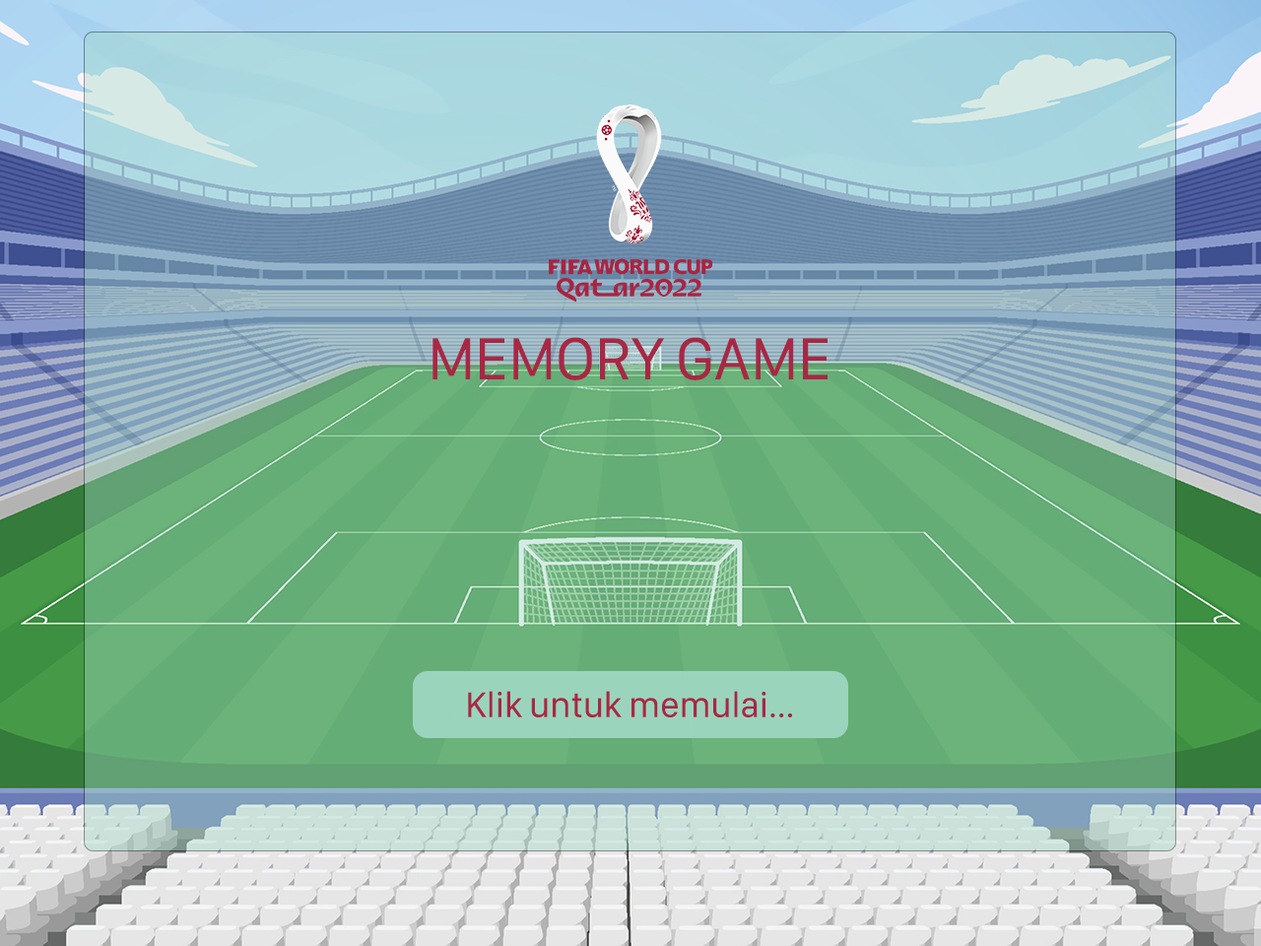
<style>
.page{position:relative;width:1261px;height:946px}
.page>*{position:absolute;margin:0}
.t1{font:61.6px "SFCompactDisplay-Regular";color:#a72845}
.t2{font:36.9px "SFCompactDisplay-Regular";color:#a72845}
</style>
<div class="page">
<p class="t1" style="left:432px;top:337px;width:395px;height:43px">MEMORY GAME</p>
<p class="t2" style="left:468px;top:691px;width:324px;height:26px">Klik untuk memulai...</p>
</div>
